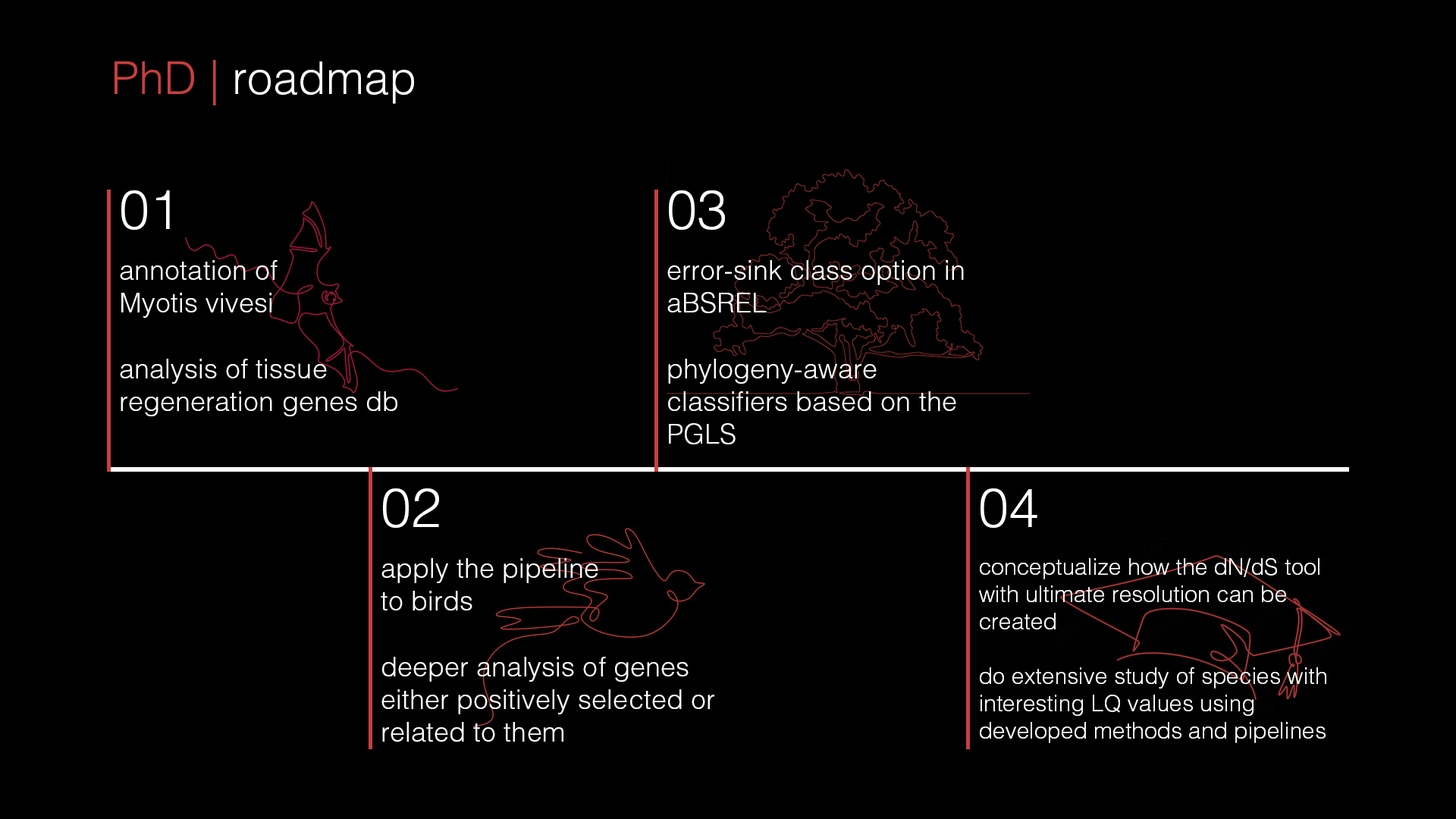
<style>
.page{position:relative;width:1456px;height:819px;background:#000000}
.page>*{position:absolute;margin:0}
.t1{font:45.5px "Helvetica-Light";color:#ffffff}
.t2{font:45.5px "Helvetica-Light";color:#c73f3f}
.t3{font:54.6px "Helvetica-Light";color:#ffffff}
.t4{font:27.3px "Helvetica-Light";color:#ffffff}
.t5{font:22.7px "Helvetica-Light";color:#ffffff}
</style>
<div class="page">
<p class="t1" style="left:115px;top:60px;width:299px;height:45px"><span class="t2">PhD |</span> roadmap</p>
<p class="t3" style="left:121px;top:190px;width:49px;height:40px">01</p>
<p class="t3" style="left:669px;top:190px;width:56px;height:40px">03</p>
<p class="t4" style="left:120px;top:260px;width:277px;height:156px">annotation of <br>Myotis vivesi<br><br>analysis of tissue regeneration genes db</p>
<p class="t4" style="left:667px;top:260px;width:297px;height:184px">error-sink class option in aBSREL<br><br>phylogeny-aware classifiers based on the PGLS</p>
<p class="t3" style="left:383px;top:488px;width:56px;height:40px">02</p>
<p class="t3" style="left:981px;top:488px;width:56px;height:40px">04</p>
<p class="t4" style="left:381px;top:558px;width:333px;height:184px">apply the pipeline<br>to birds<br><br>deeper analysis of genes either positively selected or related to them</p>
<p class="t5" style="left:979px;top:558px;width:347px;height:185px">conceptualize how the dN/dS tool with ultimate resolution can be created<br><br>do extensive study of species with interesting LQ values using developed methods and pipelines</p>
</div>
